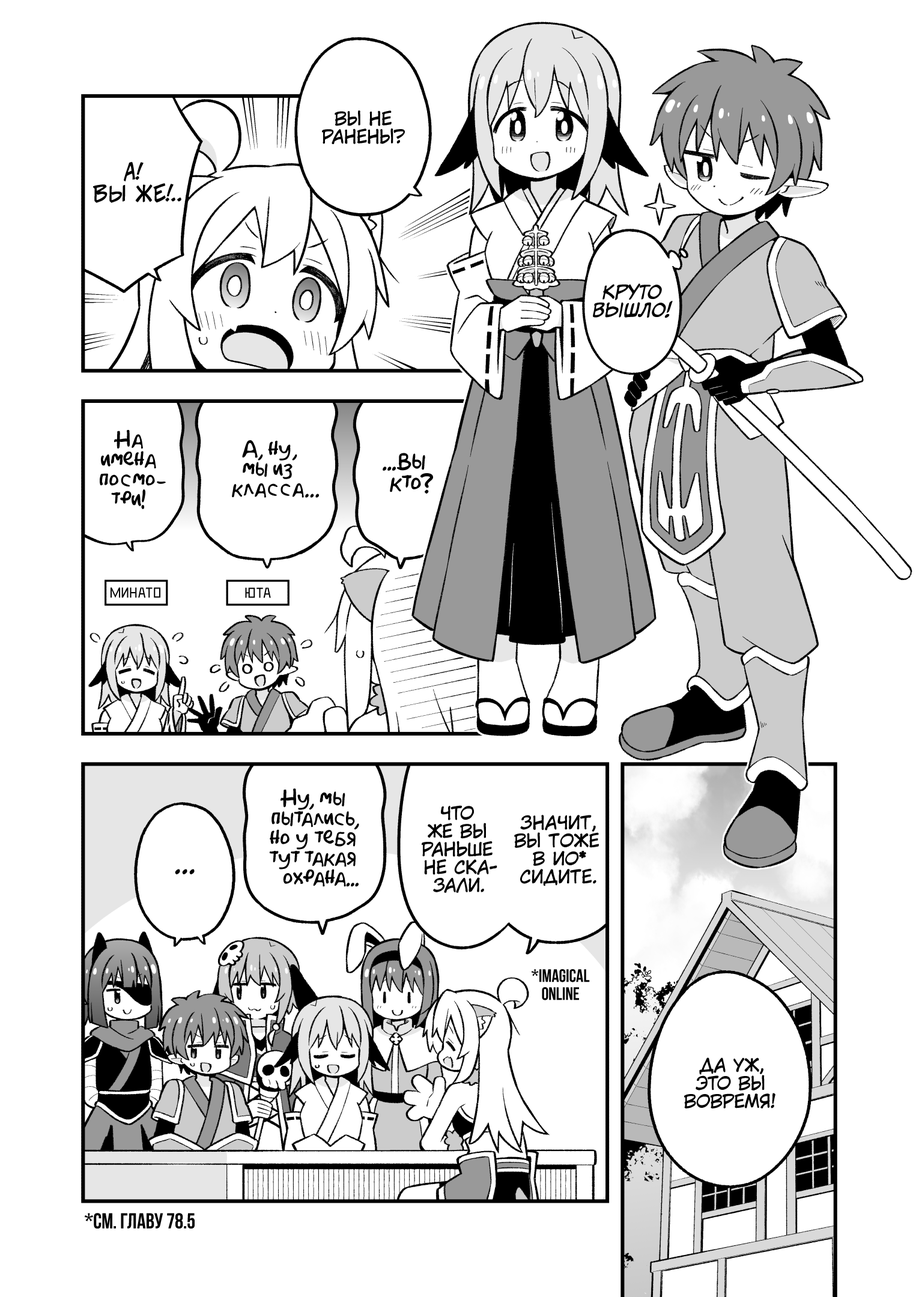
<style>
.page{position:relative;width:919px;height:1297px;background:#ffffff}
.page>*{position:absolute;margin:0}
.t1{font:18px "KuraiVoice2";color:#000000;text-transform:uppercase}
.t2{font:21.6px "v_CCJeffCampbell";color:#000000;text-transform:uppercase}
.t3{font:18px "v_CCJeffCampbell";color:#000000;text-transform:uppercase}
.t4{font:18px "CCMeanwhile";color:#000000;text-transform:uppercase;font-style:italic}
.t5{font:19.8px "AkbarPlain";color:#000000}
.t6{font:21.6px "AkbarPlain";color:#000000}
.t7{font:14.4px "DeadMetroC";color:#000000;text-transform:uppercase}
.t8{font:27px "KuraiVoice2";color:#000000;text-transform:uppercase}
.t9{font:18px "Adderley-Bold";color:#000000;text-transform:uppercase}
.t10{font:21.6px "Adderley-Bold";color:#000000;text-transform:uppercase}
</style>
<div class="page">
<p class="t1" style="left:322px;top:111px;width:83px;height:33px;text-align:center">Вы не<br>ранены?</p>
<p class="t2" style="left:93px;top:162px;width:88px;height:41px;text-align:center">А!<br>Вы же!<span class="t3">..</span></p>
<p class="t4" style="left:593px;top:284px;width:80px;height:34px;text-align:center">Круто<br>вышло!</p>
<p class="t5" style="left:100px;top:430px;width:66px;height:79px;text-align:center">На<br>имена<br>посмо-<br>три!</p>
<p class="t5" style="left:232px;top:440px;width:87px;height:58px;text-align:center">А, ну,<br>мы из<br>класса...</p>
<p class="t6" style="left:383px;top:453px;width:50px;height:41px;text-align:center">...Вы<br>кто?</p>
<p class="t7" style="left:111px;top:587px;width:49px;height:11px">Минато</p>
<p class="t7" style="left:245px;top:587px;width:26px;height:11px">Юта</p>
<p class="t5" style="left:269px;top:789px;width:90px;height:98px;text-align:center">Ну, мы<br>пытались,<br>но у тебя<br>тут такая<br>охрана...</p>
<p class="t1" style="left:422px;top:806px;width:75px;height:87px;text-align:center">Что<br>же вы<br>раньше<br>не ска-<br>зали.</p>
<p class="t1" style="left:514px;top:815px;width:85px;height:72px;text-align:center">Значит,<br>вы тоже<br>в ИО*<br>сидите.</p>
<p class="t8" style="left:175px;top:869px;width:20px;height:6px">...</p>
<p class="t9" style="left:531px;top:970px;width:59px;height:31px;text-align:center">*Imagical<br>Online</p>
<p class="t1" style="left:684px;top:1058px;width:91px;height:51px;text-align:center">Да уж,<br>это вы<br>вовремя!</p>
<p class="t10" style="left:85px;top:1213px;width:110px;height:16px">*См. главу 78.5</p>
</div>
